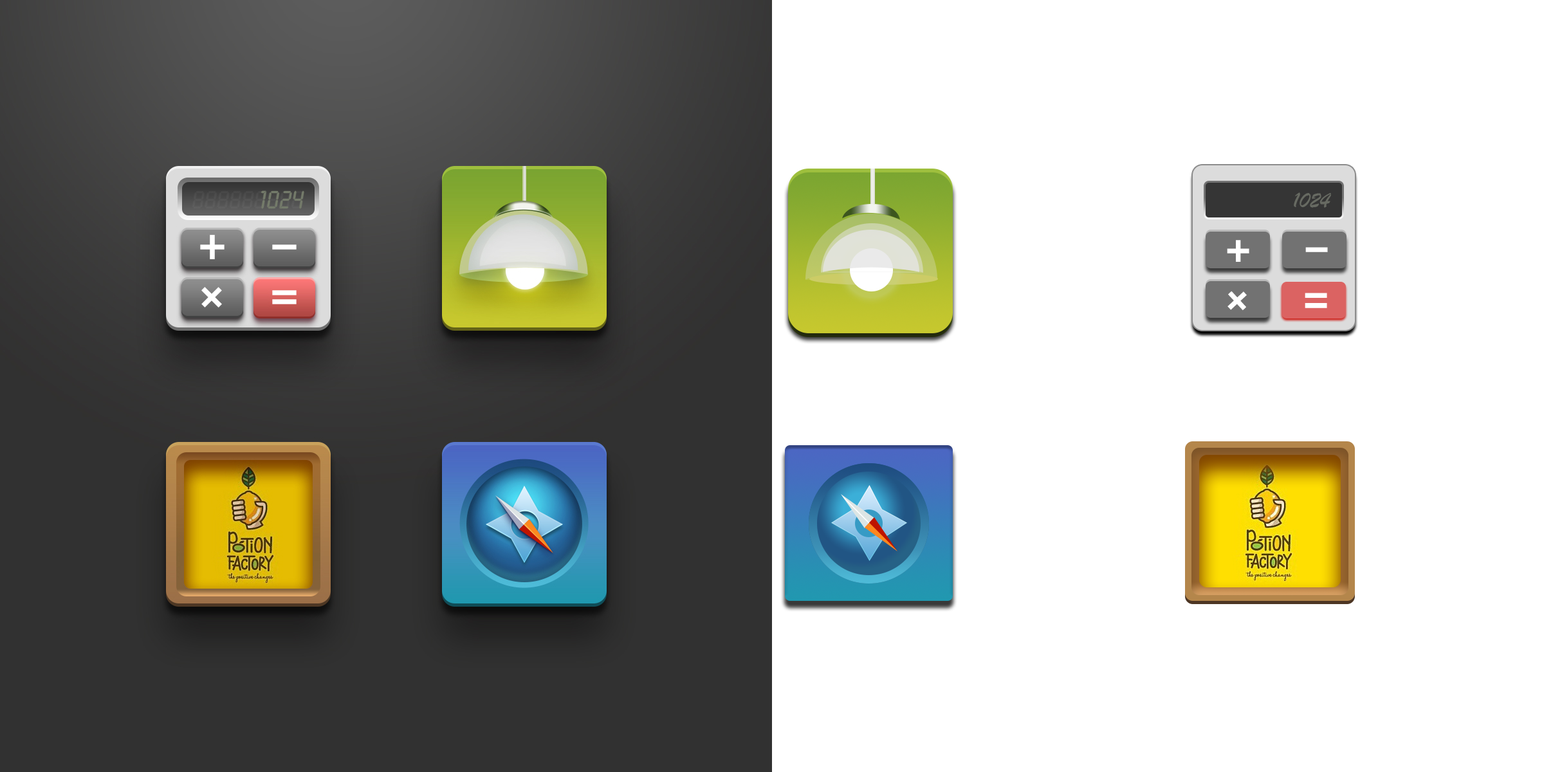
<style>
.page{position:relative;width:1544px;height:772px;background:#ffffff}
.page>*{position:absolute;margin:0}
.t1{font:23.2px "STXingkai";color:#676a62}
.t2{font:46.3px "FZCHSJW--GB1-0";color:#ffffff}
</style>
<div class="page">
<p class="t1" style="left:1294px;top:192px;width:37px;height:16px">1024</p>
<p class="t2" style="left:1227px;top:240px;width:23px;height:22px">+</p>
<p class="t2" style="left:1306px;top:247px;width:22px;height:5px">-</p>
<p class="t2" style="left:1228px;top:291px;width:19px;height:20px;rotate:47deg">+</p>
<p class="t2" style="left:1305px;top:293px;width:22px;height:15px">=</p>
</div>
